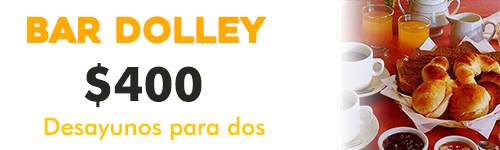
<style>
.page{position:relative;width:500px;height:150px;background:#ffffff}
.page>*{position:absolute;margin:0}
.t1{font:35.6px "Heavitas";color:#ffab00}
.t2{font:47.5px "FuturaBT-Bold";color:#272822}
.t3{font:23.8px "FuturaBT-Medium";color:#fec901}
</style>
<div class="page">
<p class="t1" style="left:27px;top:16px;width:239px;height:28px">bar dolley</p>
<p class="t2" style="left:84px;top:63px;width:118px;height:45px">$400</p>
<p class="t3" style="left:44px;top:116px;width:221px;height:24px">Desayunos para dos</p>
</div>
